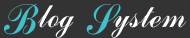
<style>
.page{position:relative;width:190px;height:38px;background:#333333}
.page>*{position:absolute;margin:0}
.t1{font:44.4px "GrosvenorScript";letter-spacing:0.03em;color:#40c0cb}
.t2{font:33.3px "GrosvenorScript";letter-spacing:0.03em;color:#ffffff}
</style>
<div class="page">
<p class="t1" style="left:4px;top:4px;width:35px;height:31px">B</p>
<p class="t2" style="left:38px;top:5px;width:36px;height:33px">log</p>
<p class="t1" style="left:86px;top:4px;width:35px;height:31px">S</p>
<p class="t2" style="left:111px;top:7px;width:76px;height:31px">ystem</p>
</div>
